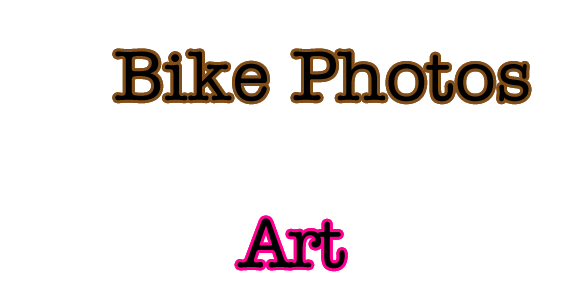
<style>
.page{position:relative;width:566px;height:303px;background:#ffffff}
.page>*{position:absolute;margin:0}
.t1{font:72px "AmerTypewriterITCbyBT-Medium";color:#000000}
.t2{font:72px "AmerTypewriterITCbyBT-Medium";letter-spacing:-0.06em;color:#000000}
</style>
<div class="page">
<p class="t1" style="left:115px;top:51px;width:414px;height:51px">Bike Photos</p>
<p class="t1" style="left:115px;top:51px;width:414px;height:51px">Bike Photos</p>
<p class="t2" style="left:237px;top:218px;width:108px;height:51px">Art</p>
<p class="t2" style="left:237px;top:218px;width:108px;height:51px">Art</p>
</div>
